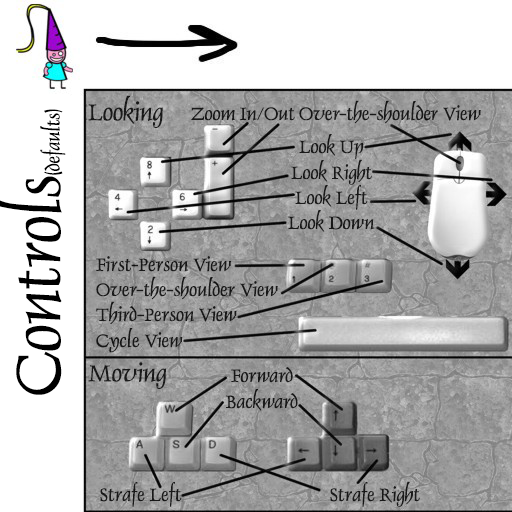
<style>
.page{position:relative;width:512px;height:512px;background:#ffffff}
.page>*{position:absolute;margin:0}
.t1{font:45px "Dauphin-Normal";letter-spacing:-0.01em;color:#191919}
.t2{font:34.7px "Dauphin-Normal";letter-spacing:-0.002em;color:#191919}
.t3{font:34.7px "Dauphin-Normal";letter-spacing:-0.042em;color:#191919}
.t4{font:35px "Dauphin-Normal";letter-spacing:-0.002em;color:#000000}
.t5{font:34.7px "Dauphin-Normal";letter-spacing:-0.002em;color:#1a1a1a}
.t6{font:34.7px "Dauphin-Normal";letter-spacing:-0.022em;color:#1a1a1a}
.t7{font:34.7px "Dauphin-Normal";letter-spacing:-0.002em;color:#181818}
</style>
<div class="page">
<p class="t1" style="left:88px;top:95px;width:75px;height:33px">Looking</p>
<p class="t2" style="left:299px;top:100px;width:182px;height:24px">Over-the-should<span class="t3">e</span>r View</p>
<p class="t4" style="left:40px;top:109px;width:26px;height:66px;rotate:-90deg">(defaults)</p>
<p class="t2" style="left:191px;top:107px;width:104px;height:14px">Zoom In/Out</p>
<p class="t2" style="left:299px;top:134px;width:65px;height:25px">Look Up</p>
<p class="t5" style="left:291px;top:159px;width:81px;height:26px">Look Right</p>
<p class="t5" style="left:295px;top:184px;width:73px;height:26px">Look Left</p>
<p class="t2" style="left:288px;top:210px;width:87px;height:22px">Look Down</p>
<p class="t2" style="left:96px;top:256px;width:135px;height:16px">First-Person View</p>
<p class="t5" style="left:96px;top:276px;width:182px;height:24px">Over-the-shou<span class="t6">l</span>d<span class="t6">e</span>r View</p>
<p class="t2" style="left:96px;top:301px;width:141px;height:24px">Third-Person View</p>
<p class="t7" style="left:96px;top:328px;width:87px;height:25px">Cycle View</p>
<p class="t1" style="left:88px;top:362px;width:78px;height:27px">Moving</p>
<p class="t2" style="left:231px;top:367px;width:62px;height:16px">Forward</p>
<p class="t2" style="left:226px;top:389px;width:72px;height:22px">Backward</p>
<p class="t2" style="left:100px;top:481px;width:82px;height:26px">Strafe Left</p>
<p class="t2" style="left:330px;top:481px;width:90px;height:26px">Strafe Right</p>
</div>
